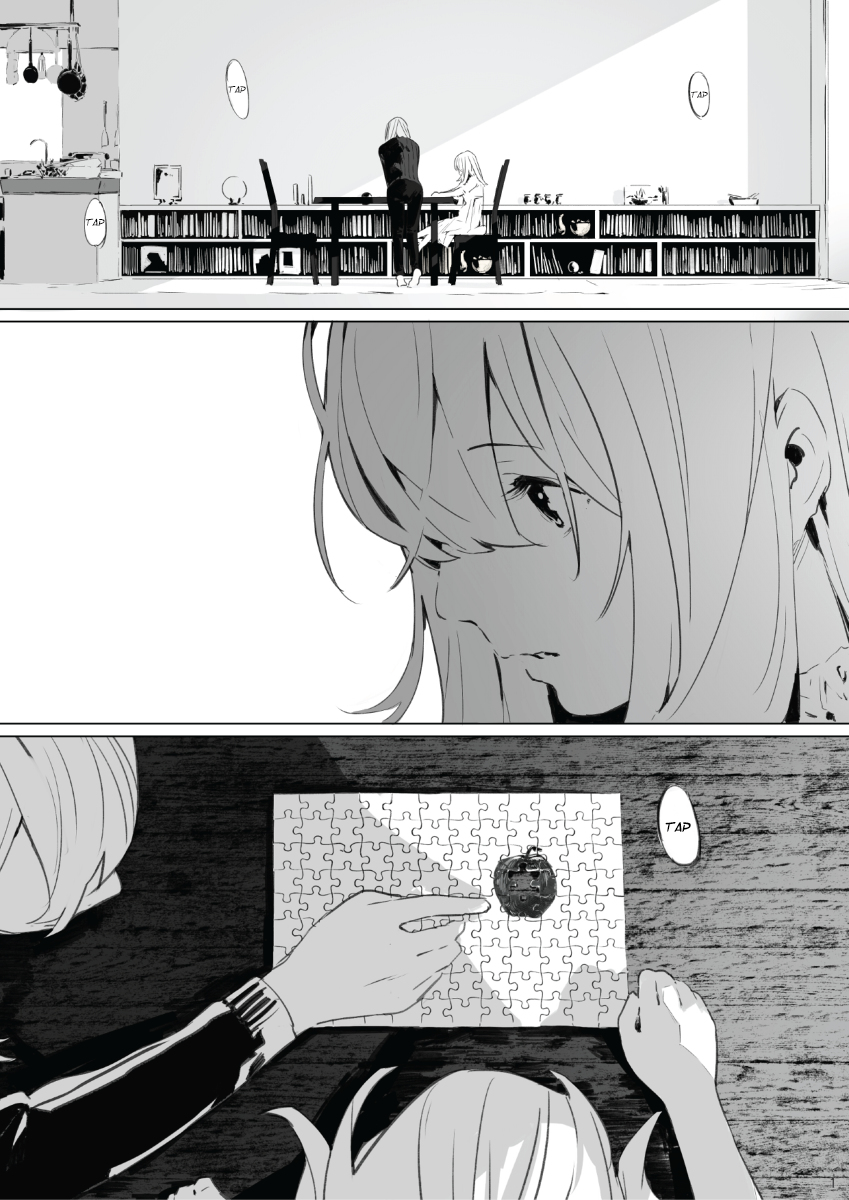
<style>
.page{position:relative;width:849px;height:1200px;background:#ffffff}
.page>*{position:absolute;margin:0}
.t1{font:10px "SFToontime";color:#000000;font-style:italic}
.t2{font:9.5px "SFToontime";color:#000000;font-style:italic}
.t3{font:10.5px "SFToontime";color:#000000;font-style:italic}
.t4{font:14px "SFToontime";color:#000000;font-style:italic}
</style>
<div class="page">
<p class="t1" style="left:228px;top:86px;width:18px;height:7px">tap</p>
<p class="t2" style="left:691px;top:91px;width:17px;height:7px">tap</p>
<p class="t3" style="left:85px;top:218px;width:20px;height:8px">tap</p>
<p class="t4" style="left:665px;top:822px;width:26px;height:10px">tap</p>
</div>
